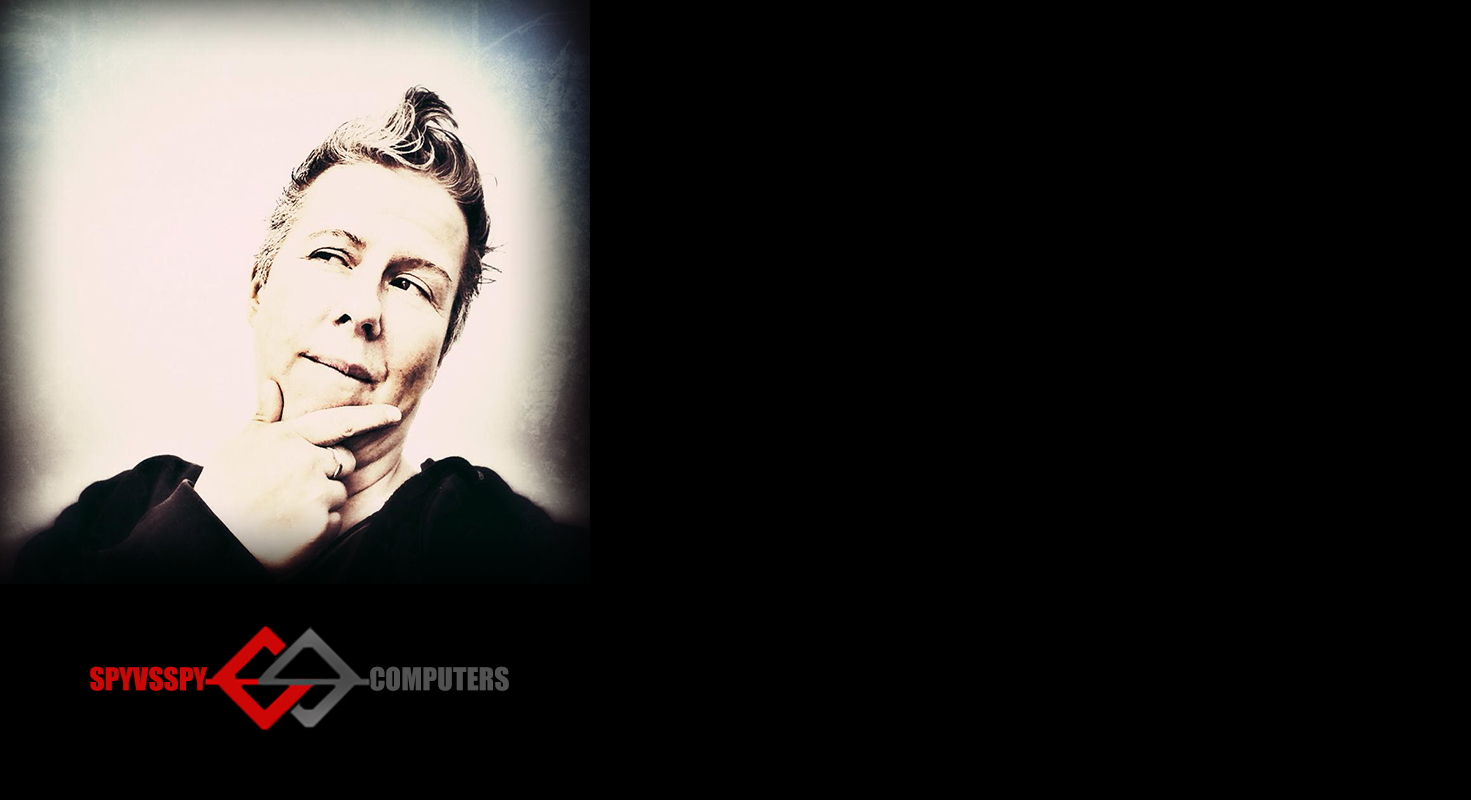
<style>
.page{position:relative;width:1471px;height:800px;background:#000000}
.page>*{position:absolute;margin:0}
.t1{font:41.8px "Impact";color:#cd0606;font-variant:small-caps}
.t2{font:41.8px "Impact";color:#515151;font-variant:small-caps}
</style>
<div class="page">
<p class="t1" style="left:90px;top:666px;width:118px;height:25px">spyvsspy</p>
<p class="t2" style="left:370px;top:666px;width:139px;height:25px">computers</p>
</div>
